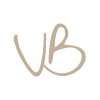
<style>
.page{position:relative;width:100px;height:100px;background:#ffffff}
.page>*{position:absolute;margin:0}
.t1{font:80.8px "Zeyada";letter-spacing:-0.1em;color:#c2af9a}
.t2{font:86.6px "Zeyada";letter-spacing:-0.1em;color:#c2af9a}
</style>
<div class="page">
<p class="t1" style="left:43px;top:23px;width:43px;height:53px;rotate:3deg">B</p>
<p class="t2" style="left:13px;top:32px;width:34px;height:45px;rotate:-7deg">V</p>
</div>
